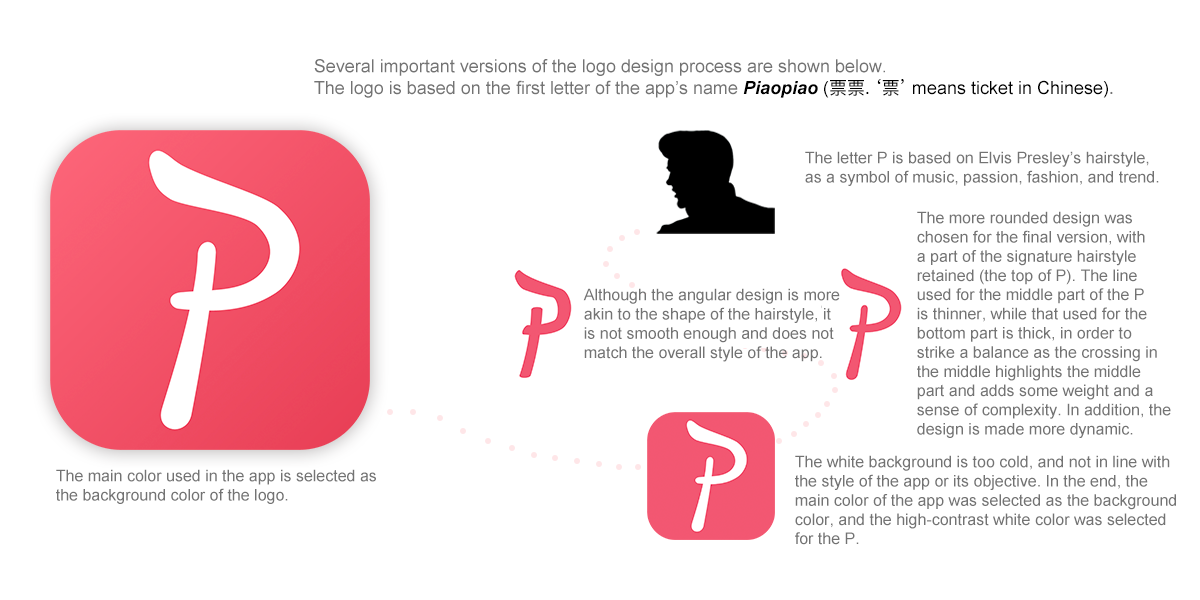
<style>
.page{position:relative;width:1200px;height:600px;background:#ffffff}
.page>*{position:absolute;margin:0}
.t1{font:18px "ArialMT";color:#737373}
.t2{font:18px "Arial-BoldItalicMT";color:#000000}
.t3{font:18px "ArialMT";color:#000000}
.t4{font:18px "PingFangSC-Regular";color:#000000}
.t5{font:18px "PingFangSC-Regular";color:#737373}
.t6{font:16px "ArialMT";color:#737373}
</style>
<div class="page">
<p class="t1" style="left:314px;top:59px;width:799px;height:39px">Several important versions of the logo design process are shown below.<br>The logo is based on the first letter of the app’s name <span class="t2">Piaopiao </span><span class="t3">(</span><span class="t4">票票. ‘票’ </span><span class="t3">means ticket in Chinese)</span><span class="t5">.</span></p>
<p class="t6" style="left:805px;top:151px;width:354px;height:35px">The letter P is based on Elvis Presley’s hairstyle, <br>as a symbol of music, passion, fashion, and trend.</p>
<p class="t6" style="left:917px;top:211px;width:254px;height:227px">The more rounded design was <br>chosen for the final version, with <br>a part of the signature hairstyle <br>retained (the top of P). The line <br>used for the middle part of the P <br>is thinner, while that used for the <br>bottom part is thick, in order to <br>strike a balance as the crossing in <br>the middle highlights the middle <br>part and adds some weight and a <br>sense of complexity. In addition, the <br>design is made more dynamic.</p>
<p class="t6" style="left:583px;top:288px;width:257px;height:74px">Although the angular design is more <br>akin to the shape of the hairstyle, it <br>is not smooth enough and does not <br>match the overall style of the app.</p>
<p class="t6" style="left:795px;top:455px;width:381px;height:90px">The white background is too cold, and not in line with <br>the style of the app or its objective. In the end, the <br>main color of the app was selected as the background <br>color, and the high-contrast white color was selected <br>for the P.</p>
<p class="t6" style="left:56px;top:469px;width:320px;height:35px">The main color used in the app is selected as <br>the background color of the logo.</p>
</div>
